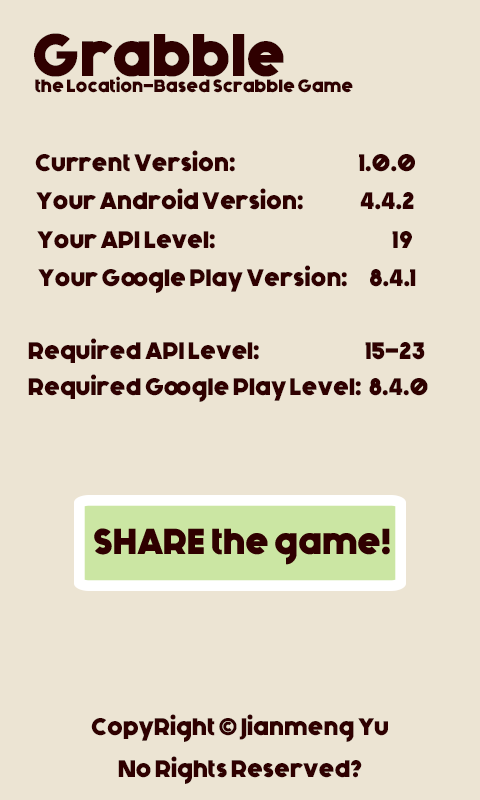
<style>
.page{position:relative;width:480px;height:800px;background:#ece4d3}
.page>*{position:absolute;margin:0}
.t1{font:60px "Generica-Bold";color:#2f0000}
.t2{font:18px "Generica-Bold";color:#2f0000}
.t3{font:24px "Generica-Bold";color:#2f0000}
</style>
<div class="page">
<p class="t1" style="left:34px;top:33px;width:250px;height:44px">Grabble</p>
<p class="t2" style="left:35px;top:76px;width:318px;height:17px">the Location-Based Scrabble Game</p>
<p class="t3" style="left:35px;top:150px;width:380px;height:22px">Current Version:     1.0.0</p>
<p class="t3" style="left:36px;top:188px;width:378px;height:22px">Your Android Version:  4.4.2</p>
<p class="t3" style="left:37px;top:231px;width:375px;height:18px">Your API Level:              19</p>
<p class="t3" style="left:38px;top:265px;width:378px;height:28px">Your Google Play Version:      8.4.1</p>
<p class="t3" style="left:28px;top:338px;width:397px;height:25px">Required API Level:                15-23</p>
<p class="t3" style="left:28px;top:374px;width:400px;height:28px">Required Google Play Level:  8.4.0</p>
<p class="t3" style="left:91px;top:714px;width:297px;height:70px;text-align:center">CopyRight © Jianmeng Yu<br>No Rights Reserved?</p>
</div>
